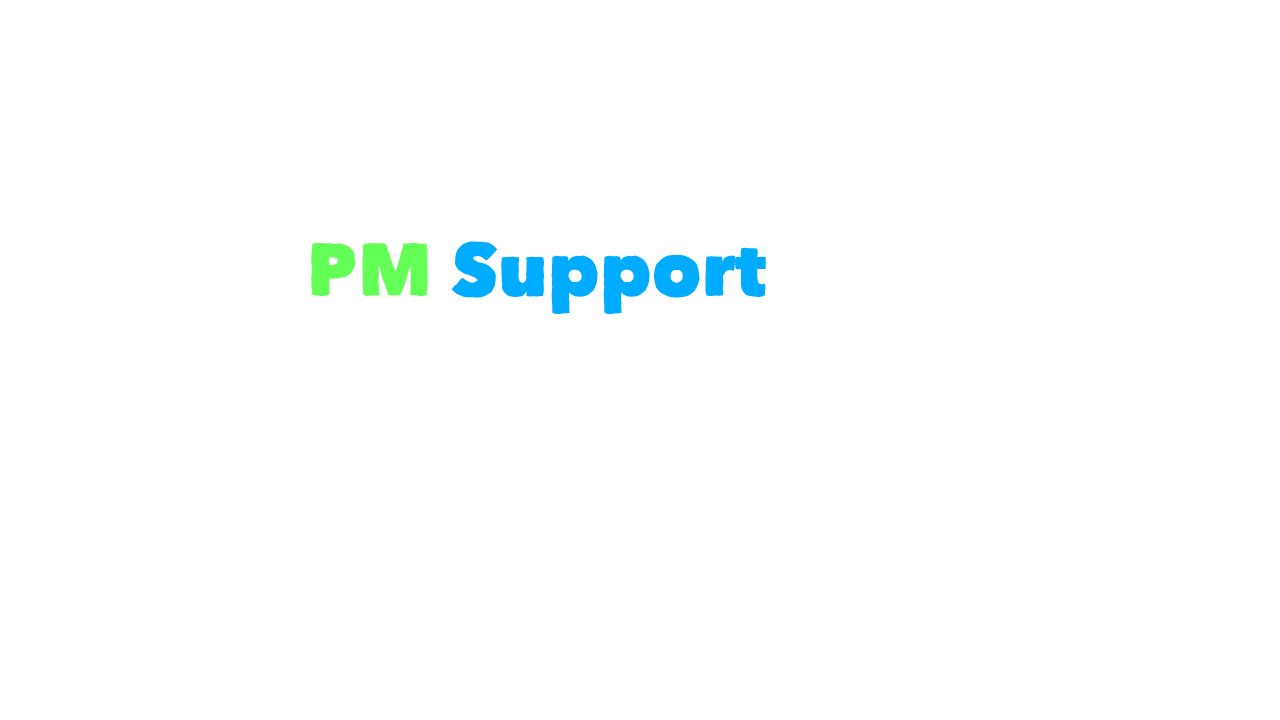
<style>
.page{position:relative;width:1280px;height:720px;background:#ffffff}
.page>*{position:absolute;margin:0}
.t1{font:75px "Matiz";color:#00acff}
.t2{font:75px "Matiz";color:#64ff56}
</style>
<div class="page">
<p class="t1" style="left:311px;top:241px;width:455px;height:73px"><span class="t2">PM </span>Support</p>
</div>
